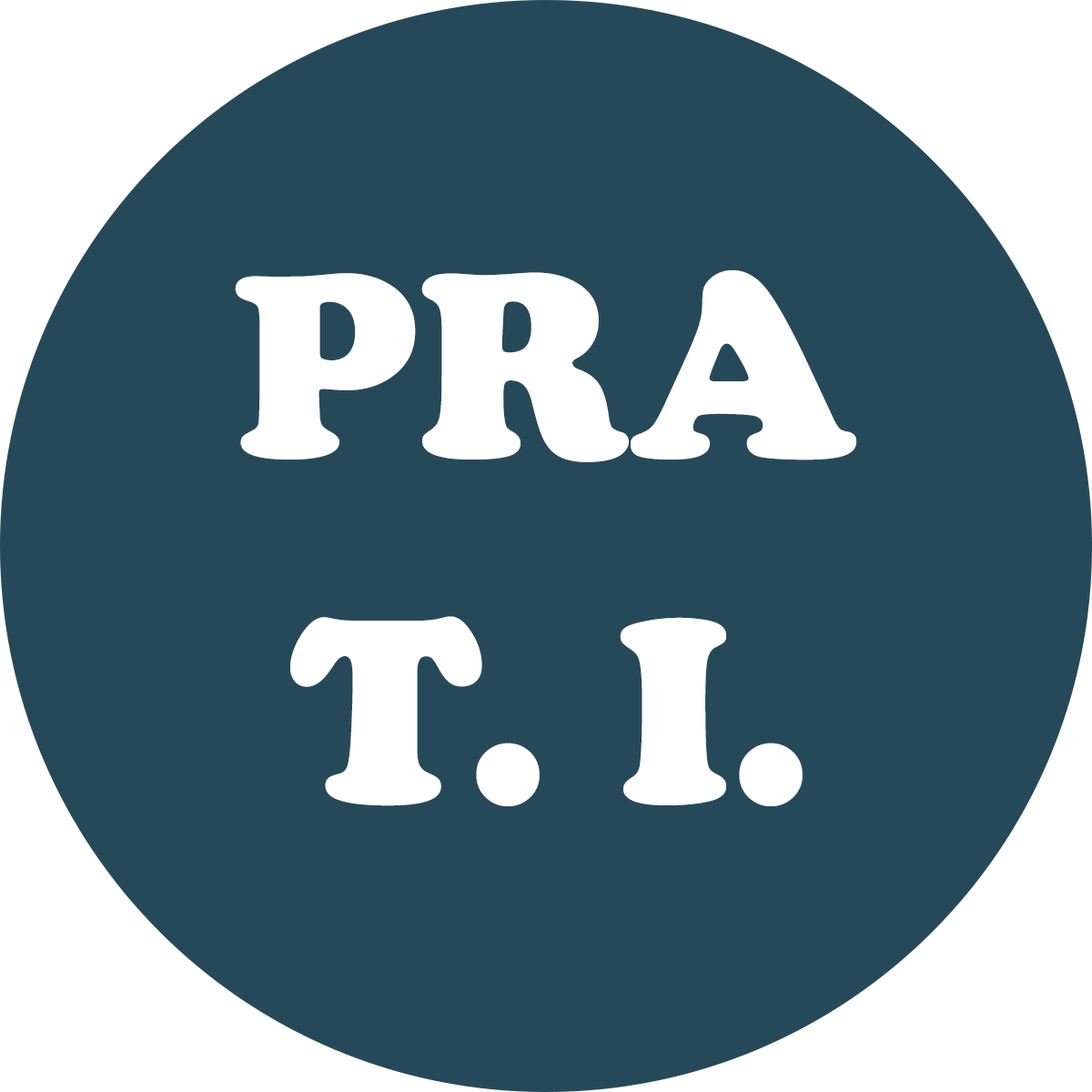
<style>
.page{position:relative;width:1092px;height:1092px;background:#264959}
.page>*{position:absolute;margin:0}
.t1{font:273px "CooperBlack";color:#ffffff}
</style>
<div class="page">
<p class="t1" style="left:235px;top:270px;width:622px;height:192px">PRA</p>
<p class="t1" style="left:290px;top:616px;width:513px;height:190px">T. I.</p>
</div>
